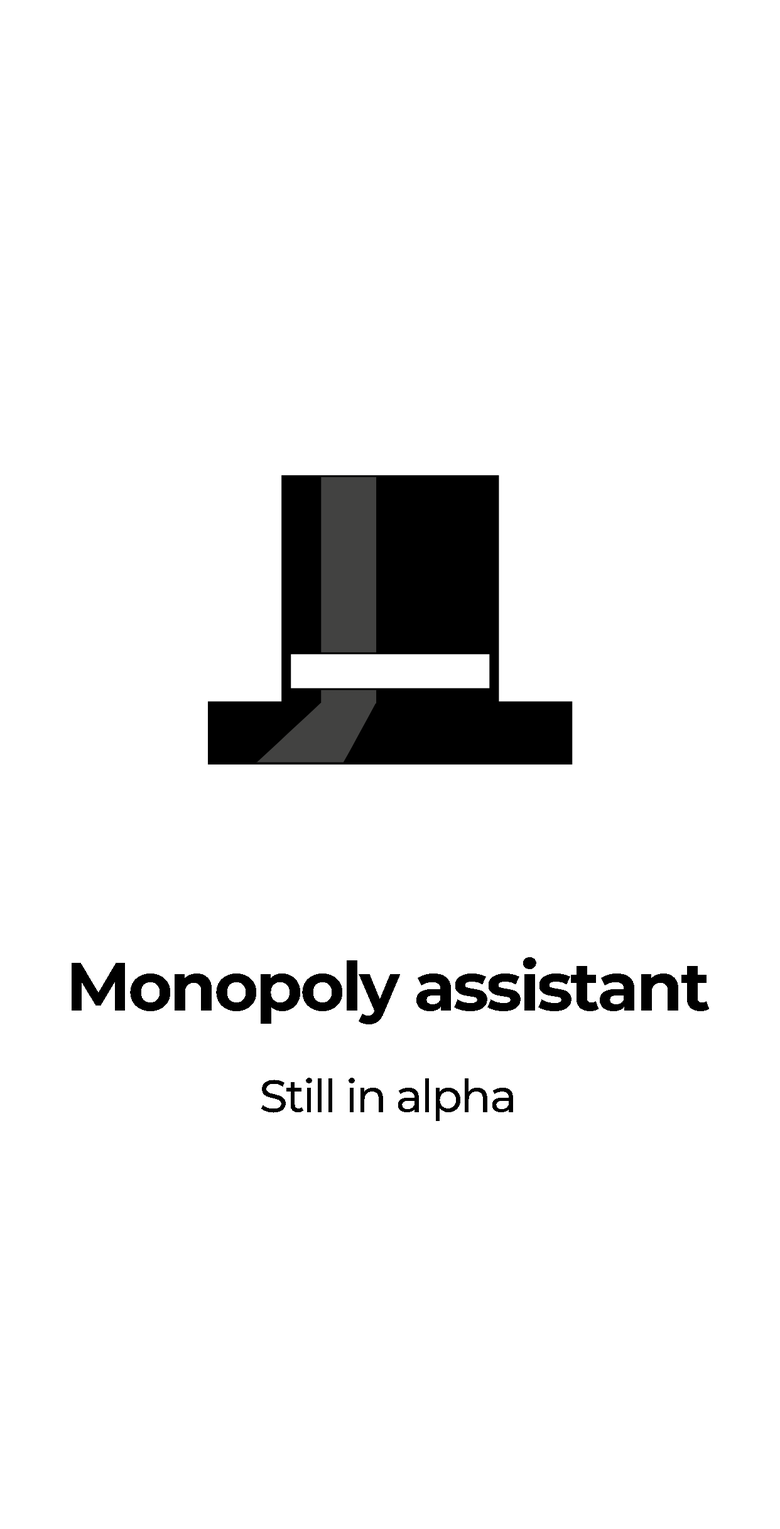
<style>
.page{position:relative;width:780px;height:1529px;background:#ffffff}
.page>*{position:absolute;margin:0}
.t1{font:67.8px "Montserrat-Bold";letter-spacing:-0.04em;color:#000000}
.t2{font:45.2px "Montserrat-Medium";letter-spacing:-0.04em;color:#000000}
</style>
<div class="page">
<p class="t1" style="left:72px;top:957px;width:637px;height:68px">Monopoly assistant</p>
<p class="t2" style="left:261px;top:1078px;width:252px;height:43px">Still in alpha</p>
</div>
